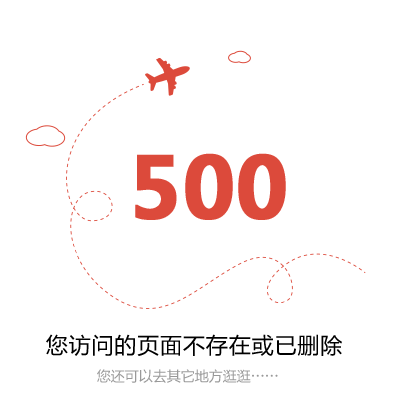
<style>
.page{position:relative;width:400px;height:400px;background:#ffffff}
.page>*{position:absolute;margin:0}
.t1{font:83.7px "MicrosoftYaHei-Bold";color:#dc4a3b;font-weight:bold}
.t2{font:22px "MicrosoftYaHei";letter-spacing:0.04em;color:#000000}
.t3{font:14px "MicrosoftYaHei";color:#999999}
.t4{font:14px "AdobeHeitiStd-Regular";color:#999999}
</style>
<div class="page">
<p class="t1" style="left:135px;top:153px;width:151px;height:67px">500</p>
<p class="t2" style="left:46px;top:334px;width:296px;height:22px">您访问的页面不存在或已删除</p>
<p class="t3" style="left:97px;top:369px;width:181px;height:14px">您还可以去其它地方逛逛<span class="t4">……</span></p>
</div>
